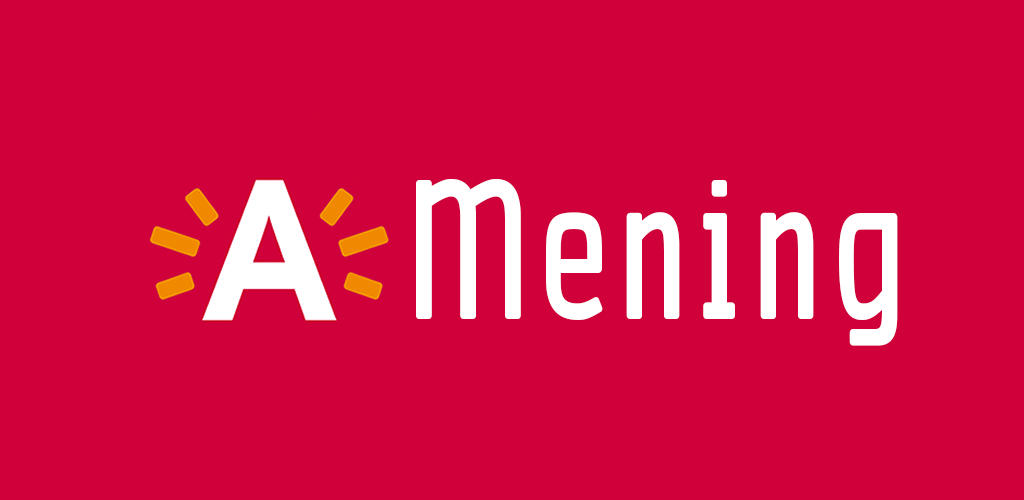
<style>
.page{position:relative;width:1024px;height:500px;background:#d0003a}
.page>*{position:absolute;margin:0}
.t1{font:135.7px "AntwerpenTall-Tall";letter-spacing:0.1em;color:#ffffff;scale:0.88 1}
</style>
<div class="page">
<p class="t1" style="left:416px;top:178px;width:482px;height:168px">Mening</p>
</div>
